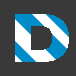
<style>
.page{position:relative;width:76px;height:76px;background:#393939}
.page>*{position:absolute;margin:0}
.t1{font:67px "Swiss721BT-BlackExtended";letter-spacing:0.05em;scale:0.87 1}
</style>
<div class="page">
<p class="t1" style="left:15px;top:14px;width:54px;height:48px">D</p>
</div>
